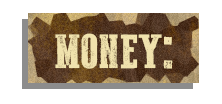
<style>
.page{position:relative;width:222px;height:104px;background:#ffffff}
.page>*{position:absolute;margin:0}
.t1{font:50px "WesternBangBang";color:#f0e2ad}
.t2{font:83.3px "WesternBangBang";color:#f0e2ad}
</style>
<div class="page">
<p class="t1" style="left:55px;top:33px;width:118px;height:36px">MONEY<span class="t2">:</span></p>
</div>
